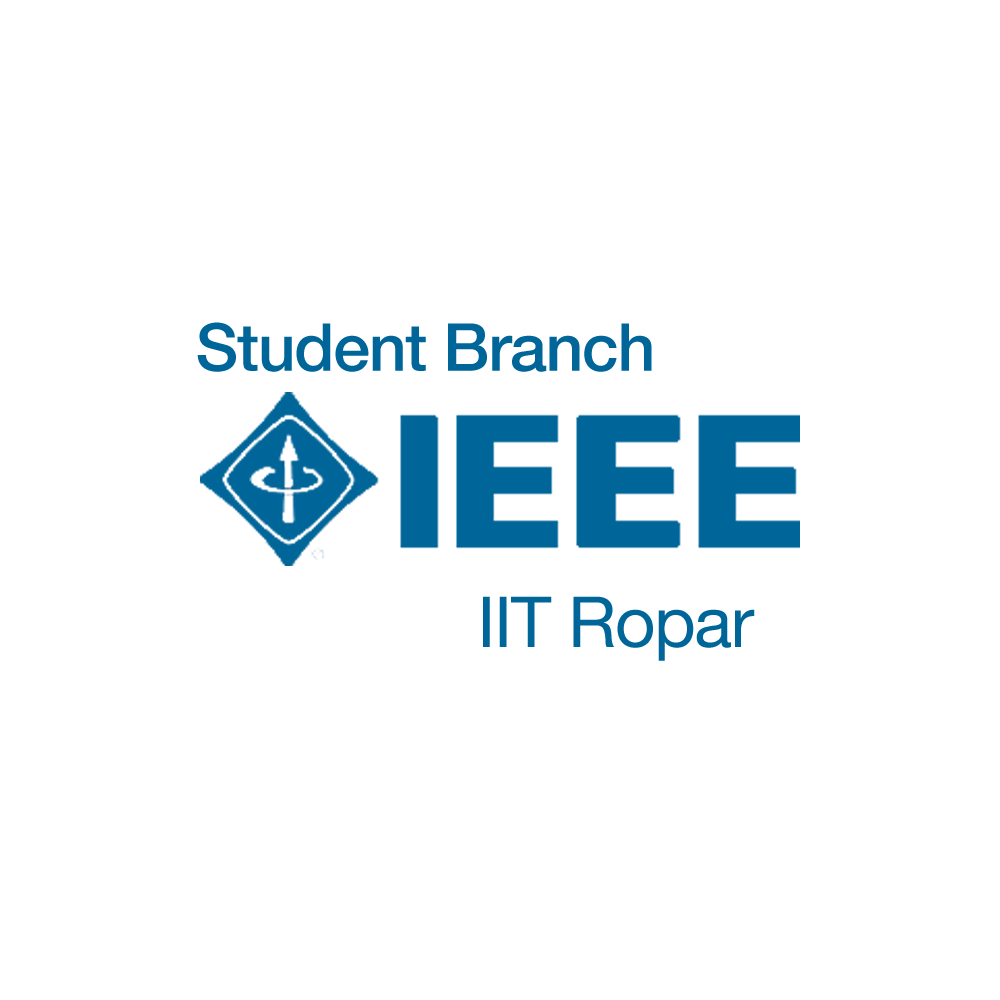
<style>
.page{position:relative;width:1000px;height:1000px;background:#ffffff}
.page>*{position:absolute;margin:0}
.t1{font:66px "HelveticaNeue-Medium";letter-spacing:-0.02em;color:#006699}
.t2{font:70.4px "HelveticaNeue";letter-spacing:-0.02em;color:#006699}
</style>
<div class="page">
<p class="t1" style="left:197px;top:322px;width:455px;height:50px">Student Branch</p>
<p class="t2" style="left:483px;top:596px;width:272px;height:65px">IIT Ropar</p>
</div>
